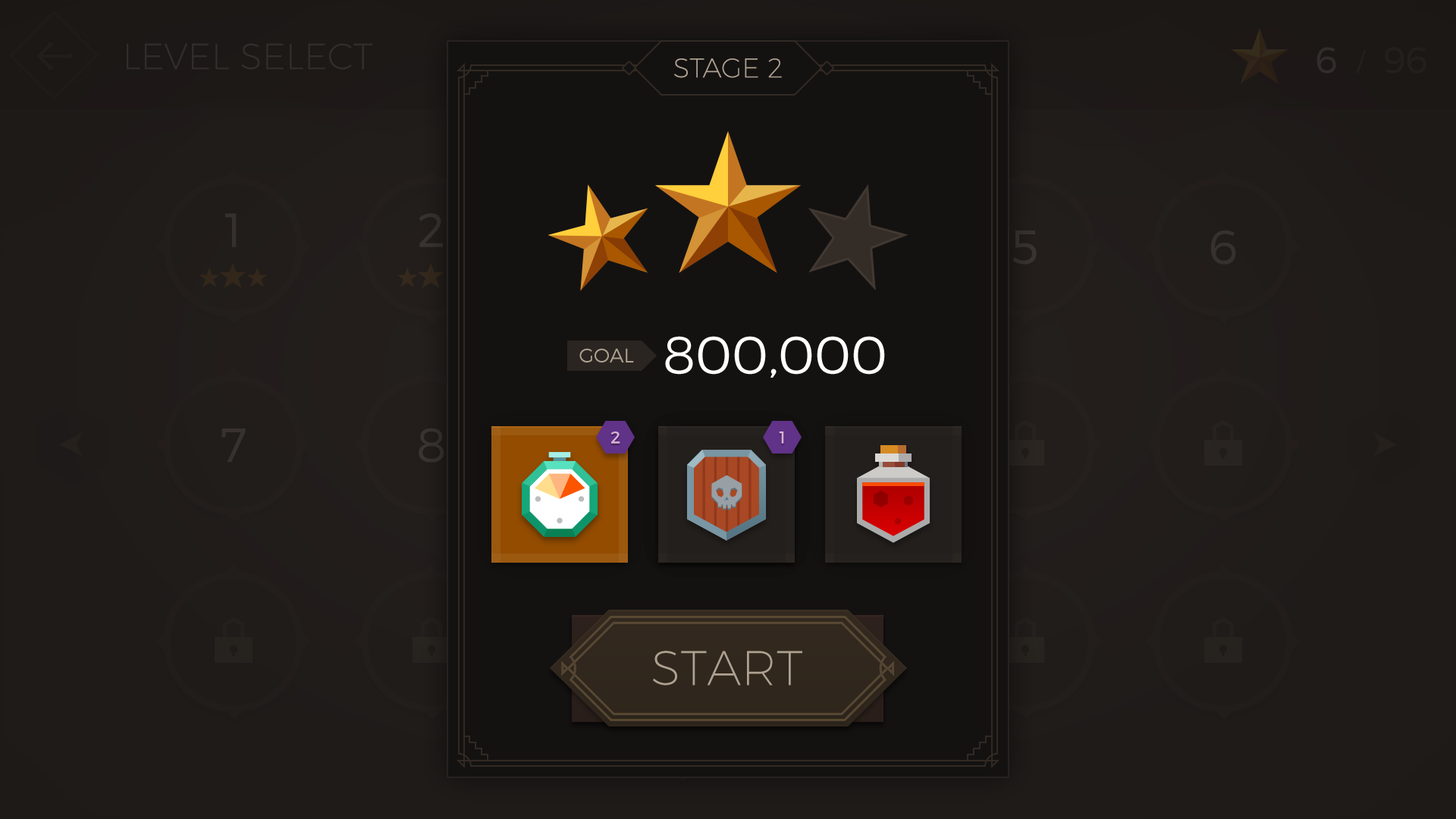
<style>
.page{position:relative;width:1456px;height:819px}
.page>*{position:absolute;margin:0}
.t1{font:27.2px "Montserrat-UltraLight";color:#aea190;text-transform:uppercase}
.t2{font:53.1px "Montserrat-Light";color:#ffffff}
.t3{font:19.7px "Montserrat-Light";color:#aea190;text-transform:uppercase}
.t4{font:17.1px "Montserrat-Regular";color:#dab1d1;text-transform:uppercase}
.t5{font:48.9px "Montserrat-UltraLight";color:#aea190;text-transform:uppercase}
</style>
<div class="page">
<p class="t1" style="left:674px;top:58px;width:108px;height:20px">stage 2</p>
<p class="t2" style="left:665px;top:336px;width:220px;height:42px">800,000</p>
<p class="t3" style="left:579px;top:348px;width:55px;height:14px">Goal</p>
<p class="t4" style="left:610px;top:431px;width:10px;height:13px">2</p>
<p class="t4" style="left:779px;top:431px;width:5px;height:13px">1</p>
<p class="t5" style="left:653px;top:651px;width:149px;height:35px">START</p>
</div>
